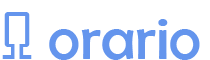
<style>
.page{position:relative;width:210px;height:60px;background:#ffffff}
.page>*{position:absolute;margin:0}
.t1{font:62px "BerlinSansFB-Reg";color:#6495ed}
</style>
<div class="page">
<p class="t1" style="left:2px;top:12px;width:198px;height:48px">Ω orario</p>
</div>
